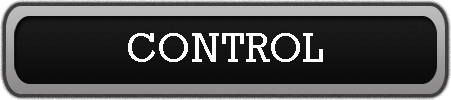
<style>
.page{position:relative;width:451px;height:100px}
.page>*{position:absolute;margin:0}
.t1{font:41.7px "Rockwell";color:#ffffff}
</style>
<div class="page">
<p class="t1" style="left:128px;top:33px;width:195px;height:29px">CONTROL</p>
</div>
